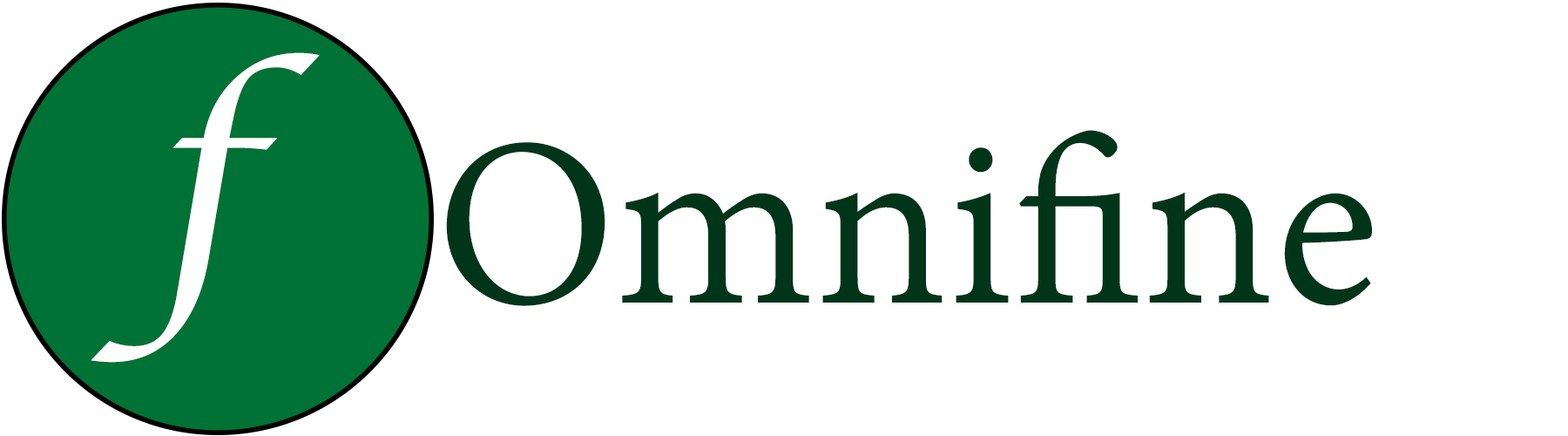
<style>
.page{position:relative;width:1568px;height:436px;background:#ffffff}
.page>*{position:absolute;margin:0}
.t1{font:261.3px "AdobeGurmukhi-Regular";color:#01351a}
</style>
<div class="page">
<p class="t1" style="left:446px;top:130px;width:926px;height:176px">Omnifine</p>
</div>
